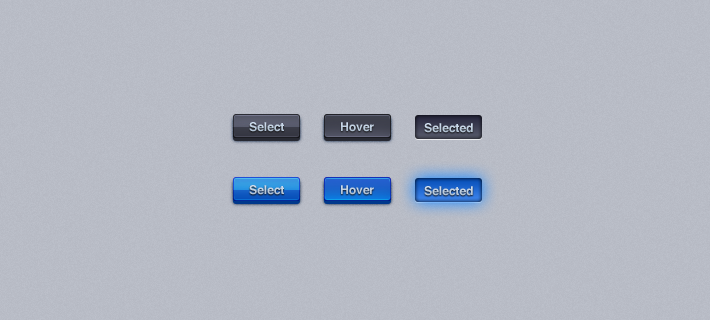
<style>
.page{position:relative;width:710px;height:320px}
.page>*{position:absolute;margin:0}
.t1{font:12px "Helvetica-Bold";color:#bdcdde}
</style>
<div class="page">
<p class="t1" style="left:249px;top:122px;width:35px;height:10px">Select</p>
<p class="t1" style="left:341px;top:122px;width:33px;height:10px">Hover</p>
<p class="t1" style="left:424px;top:123px;width:49px;height:10px">Selected</p>
<p class="t1" style="left:249px;top:185px;width:35px;height:10px">Select</p>
<p class="t1" style="left:341px;top:185px;width:33px;height:10px">Hover</p>
<p class="t1" style="left:424px;top:186px;width:49px;height:10px">Selected</p>
</div>
